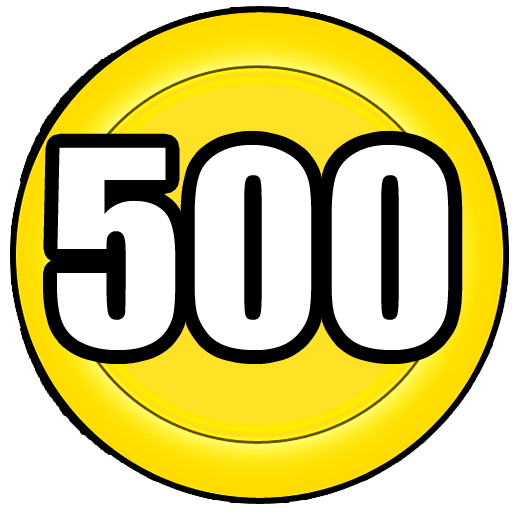
<style>
.page{position:relative;width:512px;height:512px;background:#ffffff}
.page>*{position:absolute;margin:0}
.t1{font:250px "Impact";letter-spacing:0.012em;color:#ffffff}
</style>
<div class="page">
<p class="t1" style="left:57px;top:144px;width:392px;height:206px">500</p>
</div>
